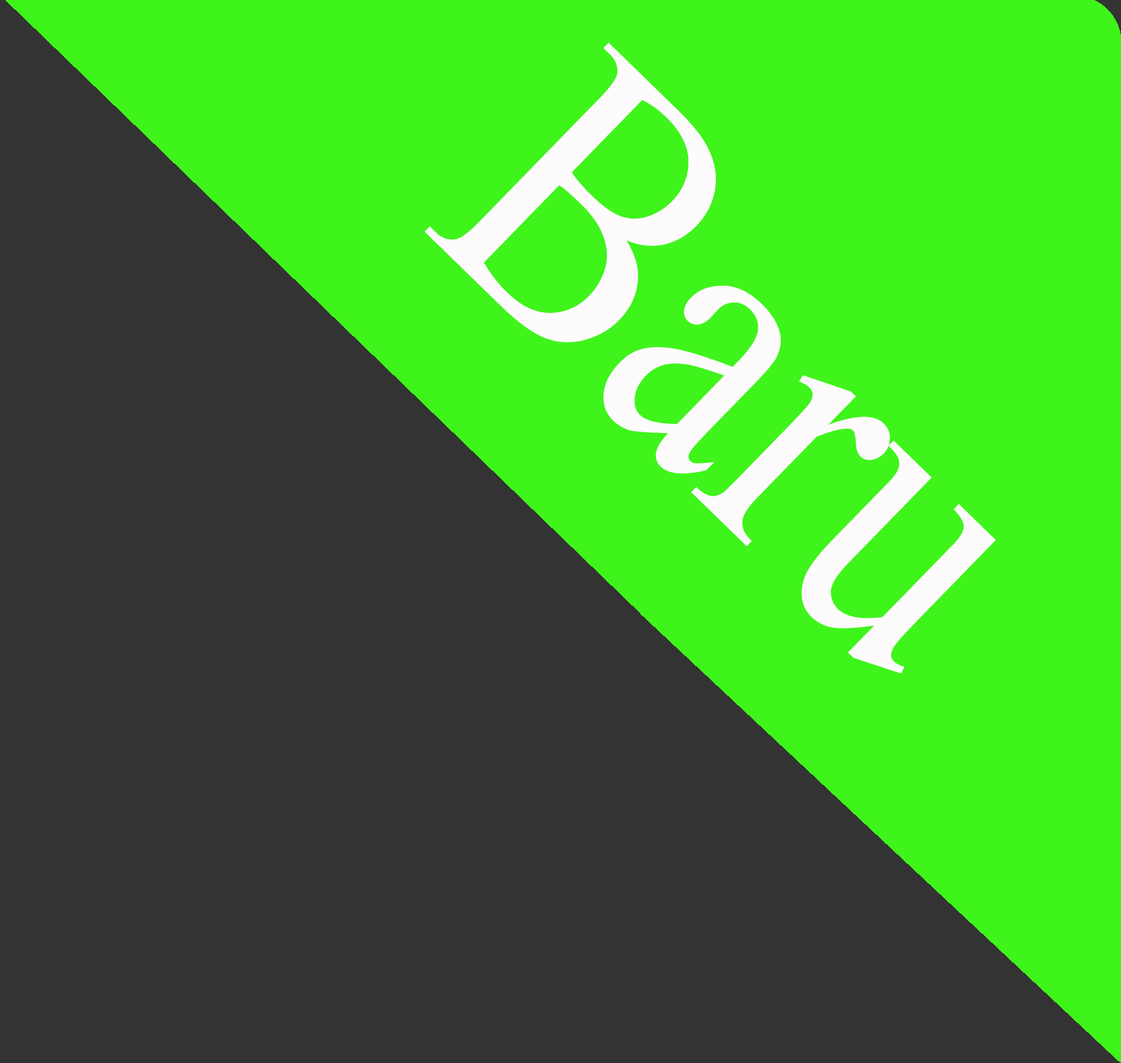
<style>
.page{position:relative;width:1121px;height:1063px;background:#333333}
.page>*{position:absolute;margin:0}
.t1{font:398.2px "TimesNewRomanPSMT";color:#fdfbfb;scale:0.85 1}
</style>
<div class="page">
<p class="t1" style="left:424px;top:42px;width:573px;height:632px;rotate:44deg">Baru</p>
</div>
